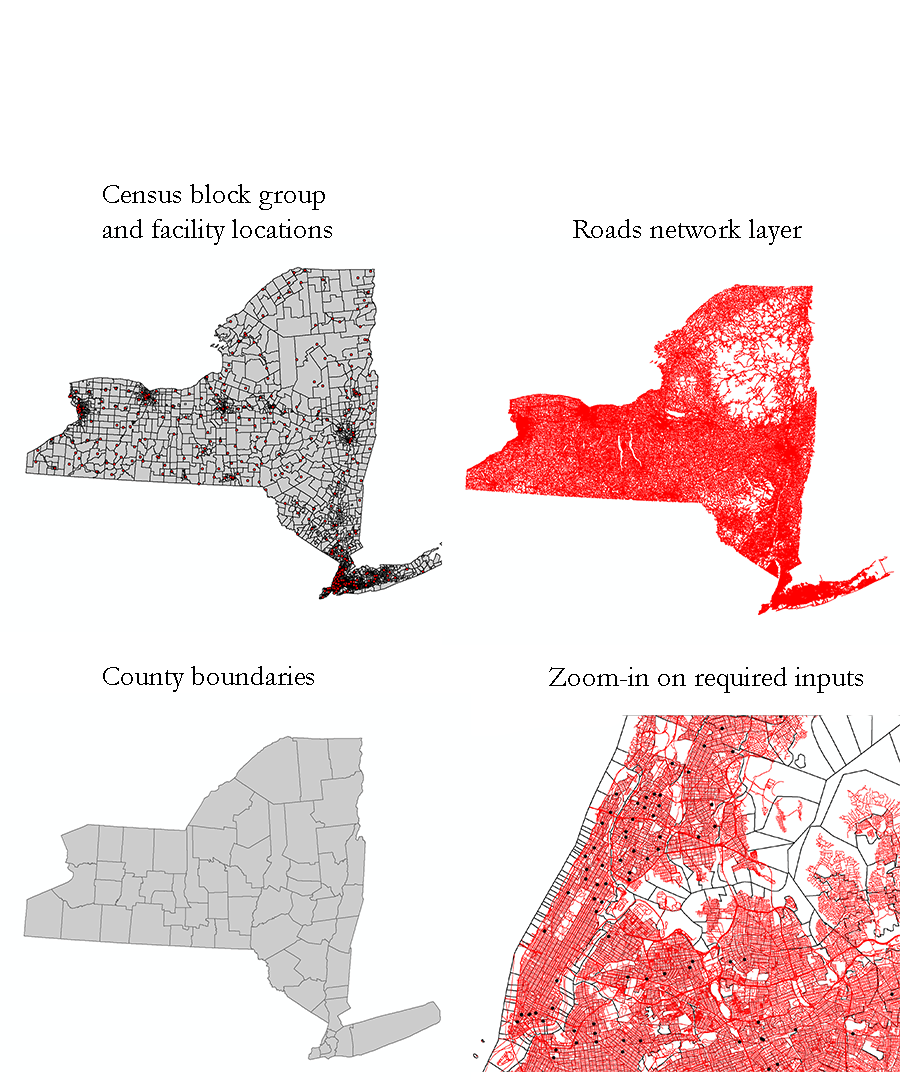
<style>
.page{position:relative;width:900px;height:1080px;background:#feffff}
.page>*{position:absolute;margin:0}
.t1{font:29.2px "Garamond";color:#000000}
.t2{font:29px "Garamond";color:#000000}
.t3{font:28.8px "Garamond";color:#000000}
</style>
<div class="page">
<p class="t1" style="left:103px;top:184px;width:229px;height:61px">Census block group <br>and facility locations</p>
<p class="t2" style="left:573px;top:219px;width:229px;height:26px">Roads network layer</p>
<p class="t3" style="left:103px;top:666px;width:211px;height:26px">County boundaries</p>
<p class="t1" style="left:549px;top:667px;width:314px;height:26px">Zoom-in on required inputs</p>
</div>
